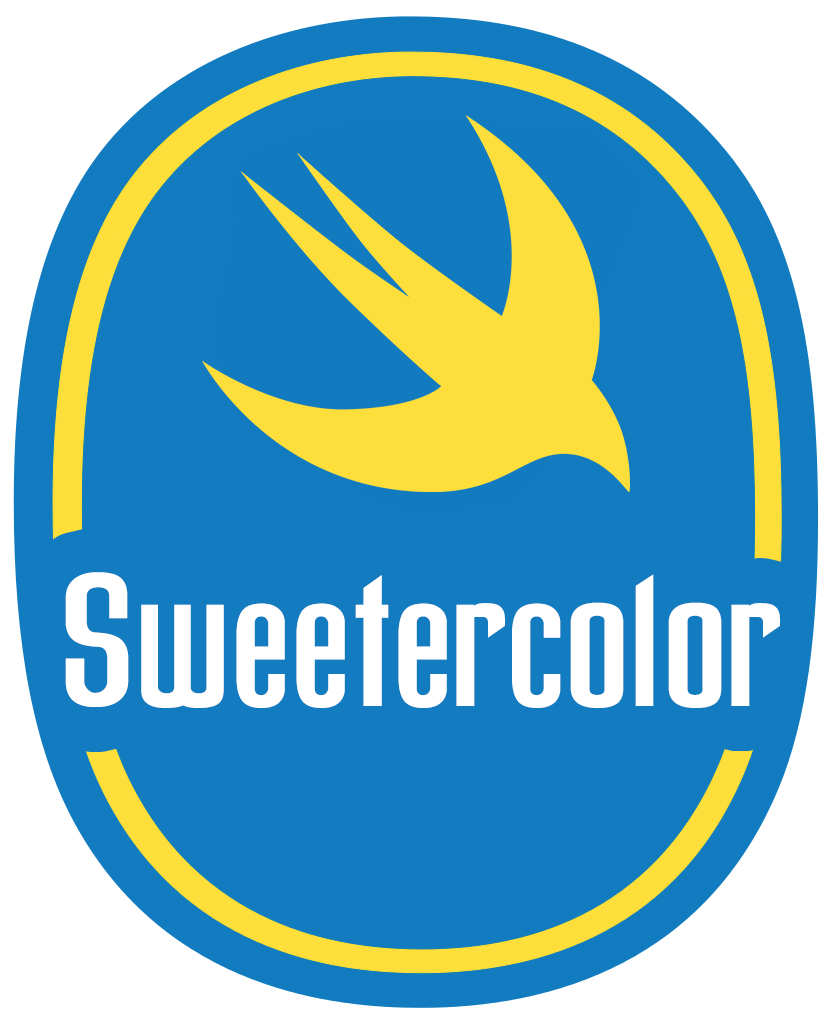
<style>
.page{position:relative;width:832px;height:1024px;background:#ffffff}
.page>*{position:absolute;margin:0}
.t1{font:225.6px "ChiquitaNormal";color:#ffffff;scale:0.8 1}
</style>
<div class="page">
<p class="t1" style="left:65px;top:572px;width:715px;height:136px">Sweetercolor</p>
</div>
